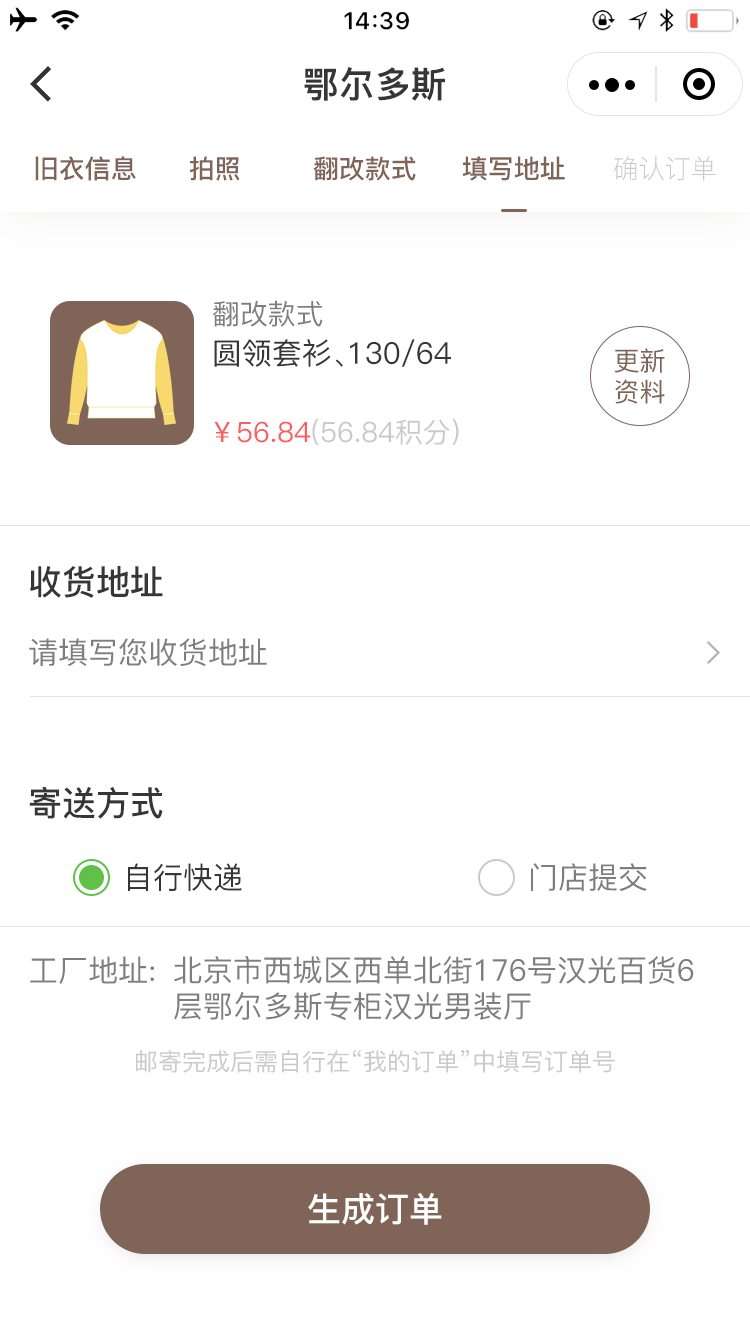
<style>
.page{position:relative;width:750px;height:1334px;background:#ffffff}
.page>*{position:absolute;margin:0}
.t1{font:36px "PingFang-SC-Heavy";color:#363636}
.t2{font:26px "PingFang-SC-Bold";color:#806458}
.t3{font:26px "PingFang-SC-Light";color:#cacaca}
.t4{font:28px "PingFang-SC-Medium";color:#7e7e7e}
.t5{font:30px "PingFang-SC-Medium";color:#363636}
.t6{font:26px "PingFang-SC-Medium";color:#806458}
.t7{font:28px "PingFang-SC-Medium";color:#cacaca}
.t8{font:28px "PingFang-SC-Medium";color:#ff5d5d}
.t9{font:34px "PingFang-SC-Bold";color:#363636}
.t10{font:30px "PingFang-SC-Medium";color:#7e7e7e}
.t11{font:24px "PingFang-SC-Medium";color:#cacaca}
.t12{font:34px "PingFang-SC-Bold";color:#ffffff}
</style>
<div class="page">
<p class="t1" style="left:304px;top:67px;width:141px;height:34px">鄂尔多斯</p>
<p class="t2" style="left:35px;top:156px;width:101px;height:25px">旧衣信息</p>
<p class="t2" style="left:189px;top:156px;width:51px;height:25px">拍照</p>
<p class="t2" style="left:313px;top:156px;width:103px;height:25px">翻改款式</p>
<p class="t2" style="left:462px;top:156px;width:103px;height:25px">填写地址</p>
<p class="t3" style="left:613px;top:156px;width:103px;height:25px">确认订单</p>
<p class="t4" style="left:213px;top:300px;width:110px;height:27px">翻改款式</p>
<p class="t5" style="left:214px;top:339px;width:237px;height:28px">圆领套衫、130/64</p>
<p class="t6" style="left:614px;top:348px;width:51px;height:56px">更新<br>资料</p>
<p class="t7" style="left:214px;top:418px;width:245px;height:27px"><span class="t8">￥56.84</span>(56.84积分)</p>
<p class="t9" style="left:30px;top:566px;width:133px;height:32px">收货地址</p>
<p class="t10" style="left:29px;top:638px;width:238px;height:28px">请填写您收货地址</p>
<p class="t9" style="left:29px;top:786px;width:134px;height:33px">寄送方式</p>
<p class="t5" style="left:128px;top:863px;width:114px;height:28px">自行快递</p>
<p class="t10" style="left:531px;top:863px;width:116px;height:28px">门店提交</p>
<p class="t10" style="left:30px;top:956px;width:124px;height:28px">工厂地址:</p>
<p class="t10" style="left:174px;top:956px;width:520px;height:64px">北京市西城区西单北街176号汉光百货6层鄂尔多斯专柜汉光男装厅</p>
<p class="t11" style="left:136px;top:1050px;width:479px;height:23px">邮寄完成后需自行在“我的订单”中填写订单号</p>
<p class="t12" style="left:308px;top:1192px;width:134px;height:33px">生成订单</p>
</div>
